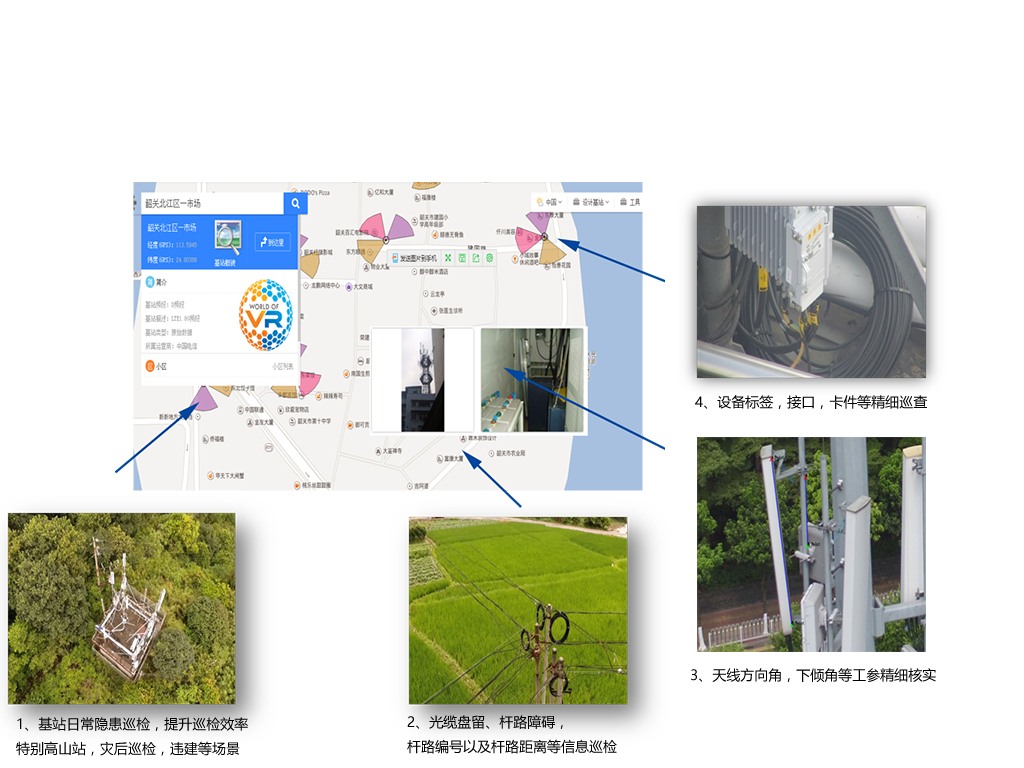
<style>
.page{position:relative;width:1024px;height:768px;background:#ffffff}
.page>*{position:absolute;margin:0}
.t1{font:14px "MicrosoftYaHei";color:#000000}
</style>
<div class="page">
<p class="t1" style="left:695px;top:395px;width:233px;height:14px">4、设备标签，接口，卡件等精细巡查</p>
<p class="t1" style="left:691px;top:668px;width:245px;height:14px">3、天线方向角，下倾角等工参精细核实</p>
<p class="t1" style="left:16px;top:717px;width:232px;height:39px">1、基站日常隐患巡检，提升巡检效率<br>特别高山站，灾后巡检，违建等场景</p>
<p class="t1" style="left:407px;top:715px;width:210px;height:39px">2、光缆盘留、杆路障碍，<br>杆路编号以及杆路距离等信息巡检</p>
</div>
